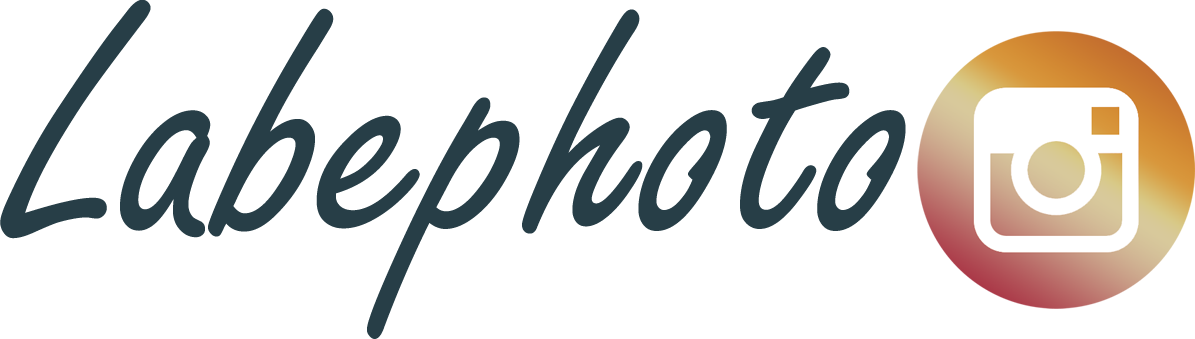
<style>
.page{position:relative;width:1195px;height:339px;background:#ffffff}
.page>*{position:absolute;margin:0}
.t1{font:375.5px "FreestyleScript-Regular";color:#273e47}
</style>
<div class="page">
<p class="t1" style="left:0px;top:0px;width:906px;height:339px">Labephoto</p>
</div>
